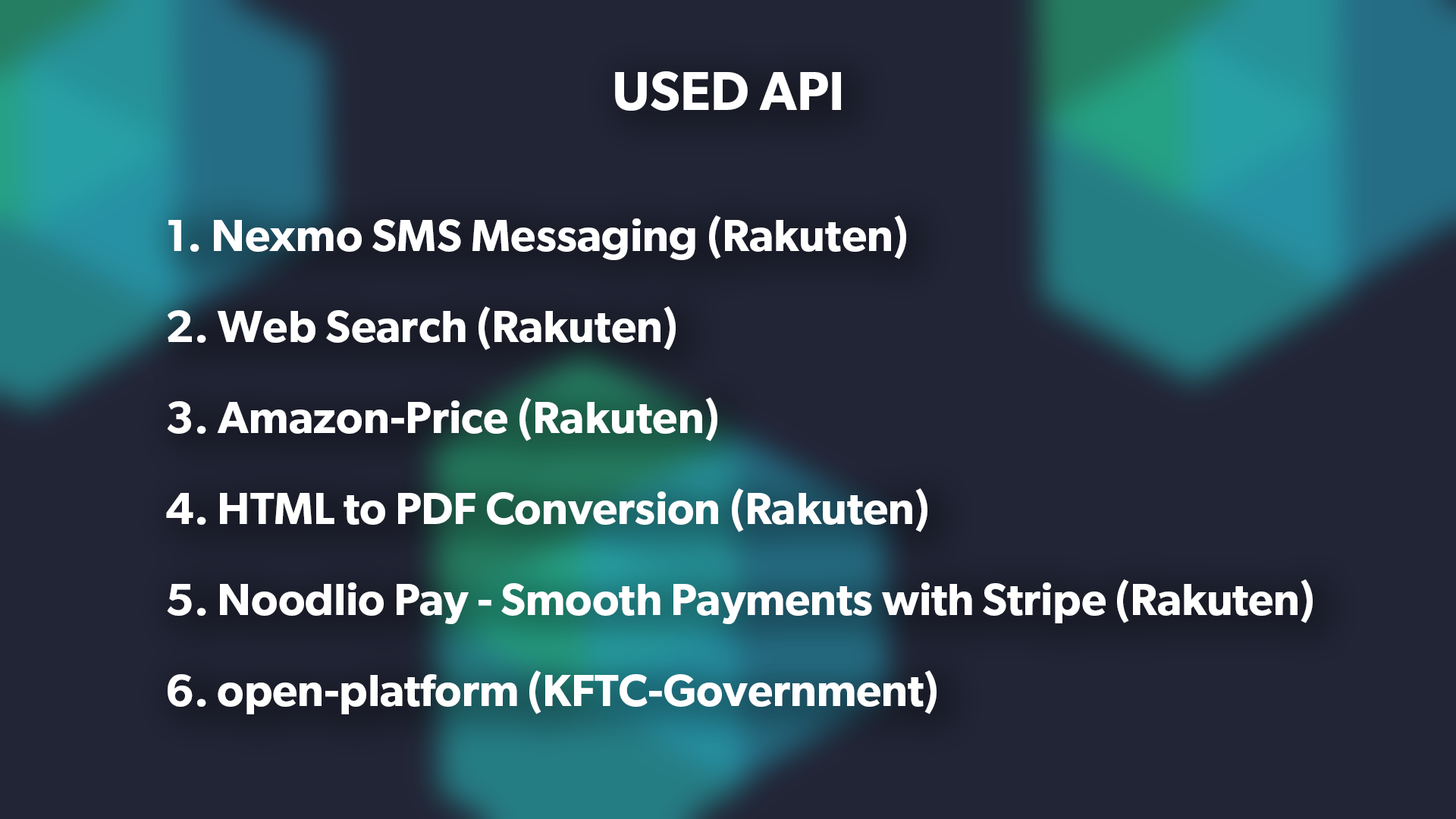
<style>
.page{position:relative;width:1456px;height:819px;background:#222536}
.page>*{position:absolute;margin:0}
.t1{font:54.6px "Gibson-SemiBold";color:#ffffff}
.t2{font:45.5px/45.5px "Gibson-SemiBold";letter-spacing:-0.005em;color:#ffffff}
.t3{font:45.5px/45.5px "Gibson-SemiBold";color:#ffffff}
</style>
<div class="page">
<p class="t1" style="left:615px;top:71px;width:226px;height:40px">USED API</p>
<p class="t2" style="left:166px;top:215px;width:1147px;height:499px"><span class="t3">1. Nexmo SMS Messaging (Rakuten)<br><br>2. Web Search (Rakuten)<br><br>3. Amazon-Price (Rakuten)<br><br></span>4. HTML to PDF Conversion (Rakuten)<br><br>5. Noodlio Pay - Smooth Payments with Stripe (Rakuten)<br><br>6. open-platform (KFTC-Government)</p>
</div>
